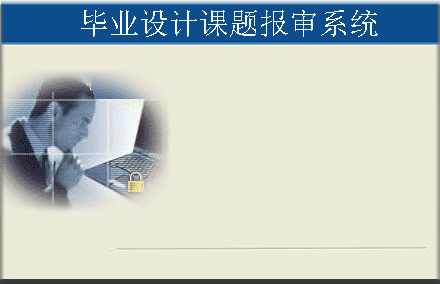
<style>
.page{position:relative;width:440px;height:284px;background:#ece9d8}
.page>*{position:absolute;margin:0}
.t1{font:30px "NSimSun";color:#f9f9f9}
</style>
<div class="page">
<p class="t1" style="left:81px;top:10px;width:297px;height:27px">毕业设计课题报审系统</p>
</div>
